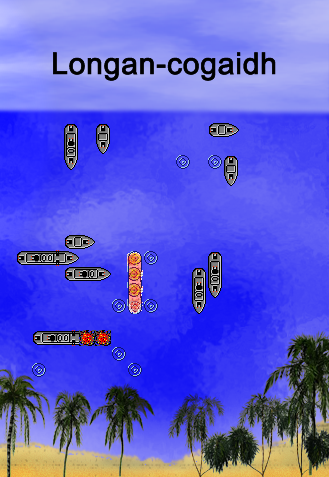
<style>
.page{position:relative;width:329px;height:477px}
.page>*{position:absolute;margin:0}
.t1{font:30px "ArialMT";color:#000000;font-weight:bold}
</style>
<div class="page">
<p class="t1" style="left:53px;top:52px;width:223px;height:29px">Longan-cogaidh</p>
</div>
